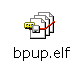
<style>
.page{position:relative;width:80px;height:80px;background:#ffffff}
.page>*{position:absolute;margin:0}
.t1{font:14px "MSReferenceSansSerif";color:#000000}
</style>
<div class="page">
<p class="t1" style="left:14px;top:47px;width:56px;height:14px">bpup.elf</p>
</div>
